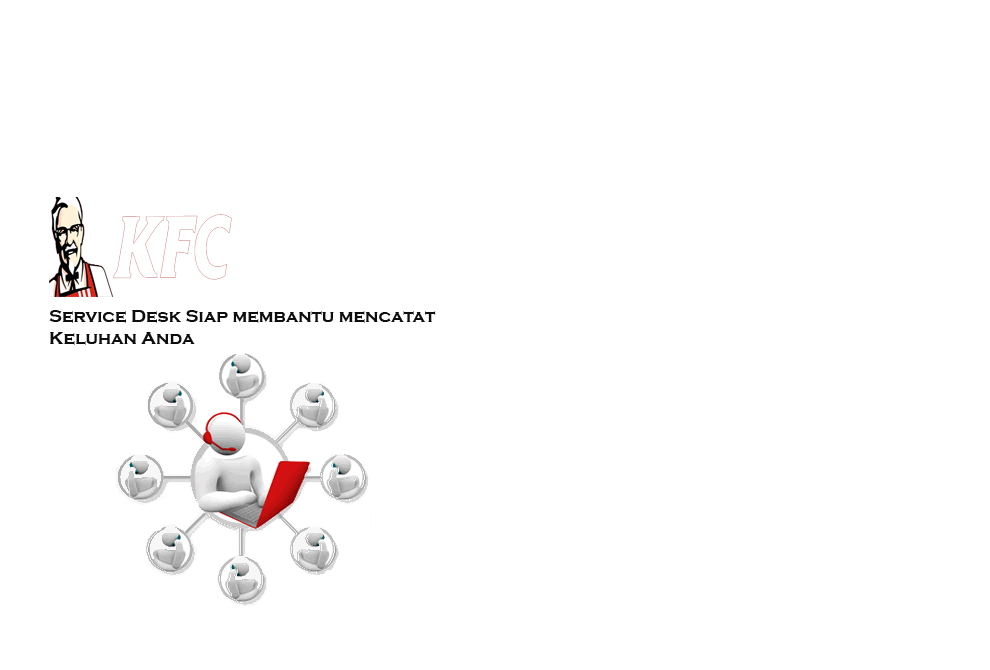
<style>
.page{position:relative;width:990px;height:670px;background:#ffffff}
.page>*{position:absolute;margin:0}
.t1{font:18px "CopperplateGothic-Bold";color:#0e0e0e}
</style>
<div class="page">
<p class="t1" style="left:49px;top:310px;width:387px;height:35px">Service Desk Siap membantu mencatat Keluhan Anda</p>
</div>
